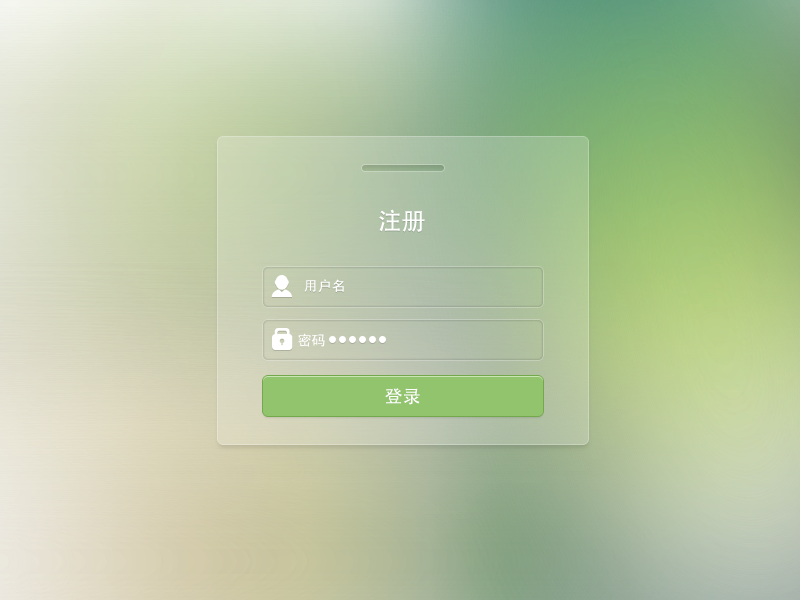
<style>
.page{position:relative;width:800px;height:600px}
.page>*{position:absolute;margin:0}
.t1{font:24px "AdobeHeitiStd-Regular";color:#ffffff}
.t2{font:14px "AdobeHeitiStd-Regular";color:#ffffff}
.t3{font:18px "AdobeHeitiStd-Regular";color:#ffffff}
</style>
<div class="page">
<p class="t1" style="left:379px;top:209px;width:46px;height:23px">注册</p>
<p class="t2" style="left:304px;top:279px;width:40px;height:14px">用户名</p>
<p class="t2" style="left:298px;top:333px;width:27px;height:14px">密码</p>
<p class="t3" style="left:385px;top:388px;width:35px;height:17px">登录</p>
</div>
